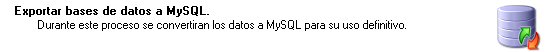
<style>
.page{position:relative;width:552px;height:52px;background:#ffffff}
.page>*{position:absolute;margin:0}
.t1{font:11.4px "MS Sans Serif";color:#000000;font-weight:bold}
.t2{font:11.4px "MS Sans Serif";color:#000000}
</style>
<div class="page">
<p class="t1" style="left:15px;top:6px;width:194px;height:11px">Exportar bases de datos a MySQL.</p>
<p class="t2" style="left:38px;top:20px;width:368px;height:11px">Durante este proceso se convertiran los datos a MySQL para su uso definitivo.</p>
</div>
